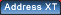
<style>
.page{position:relative;width:61px;height:15px}
.page>*{position:absolute;margin:0}
.t1{font:9px "ArialMT";letter-spacing:0.075em;color:#ffffff}
</style>
<div class="page">
<p class="t1" style="left:4px;top:3px;width:53px;height:7px">Address XT</p>
<p class="t1" style="left:4px;top:3px;width:53px;height:7px">Address XT</p>
</div>
